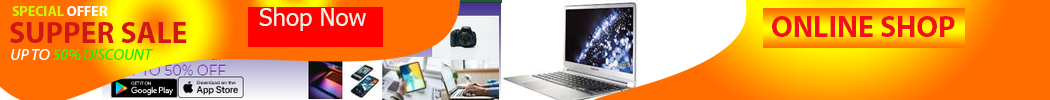
<style>
.page{position:relative;width:1050px;height:100px}
.page>*{position:absolute;margin:0}
.t1{font:14px "MyriadPro-Bold";color:#ccf606}
.t2{font:14px "MyriadPro-Bold";color:#ffffff}
.t3{font:24px "Tahoma";color:#eeeee5}
.t4{font:30px "MyriadPro-Bold";color:#f1111c}
.t5{font:30px "MyriadPro-Bold";color:#d21515}
.t6{font:16px "MyriadPro-It";color:#11e40c}
.t7{font:16px "MyriadPro-It";color:#ffffff}
.t8{font:16px "MyriadPro-It";color:#00ff12}
</style>
<div class="page">
<p class="t1" style="left:12px;top:6px;width:96px;height:10px">SPECIAL <span class="t2">OFFER</span></p>
<p class="t3" style="left:259px;top:7px;width:107px;height:24px">Shop Now</p>
<p class="t4" style="left:772px;top:16px;width:183px;height:21px">ONLINE SHOP</p>
<p class="t5" style="left:10px;top:22px;width:177px;height:21px">SUPPER SALE</p>
<p class="t6" style="left:11px;top:49px;width:142px;height:12px"><span class="t7">UP TO </span><span class="t8">50% </span>DISCOUNT</p>
</div>
